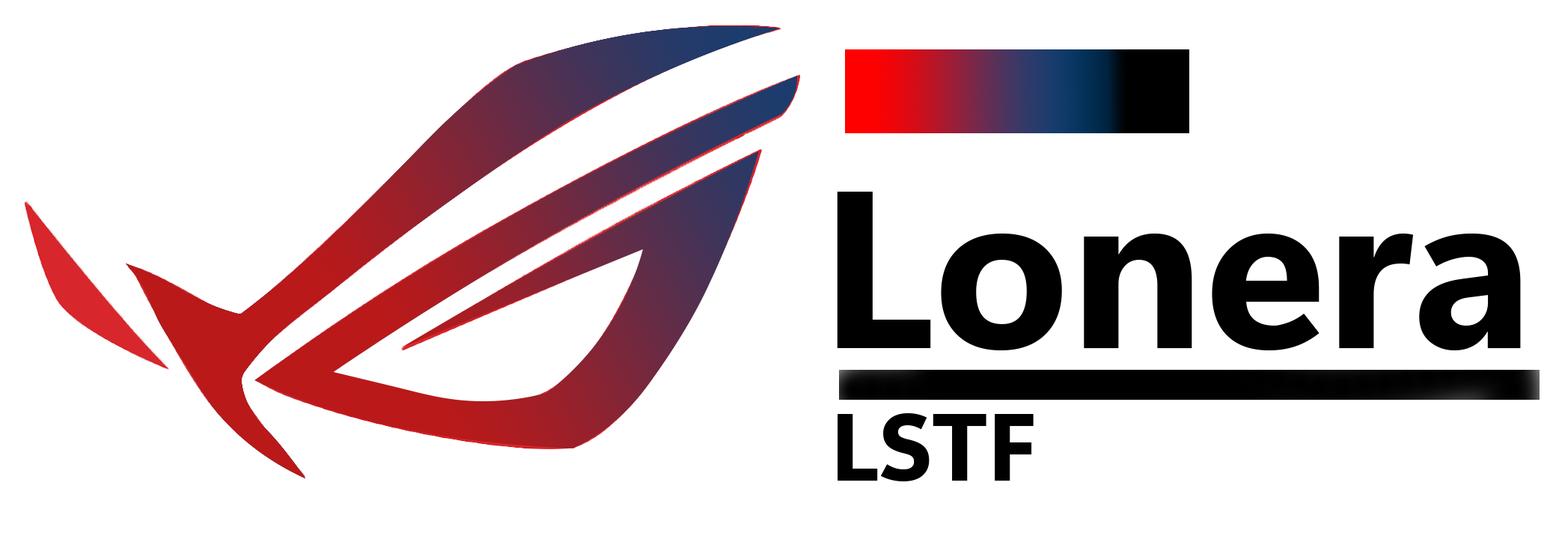
<style>
.page{position:relative;width:1568px;height:533px;background:#ffffff}
.page>*{position:absolute;margin:0}
.t1{font:222.7px "SegoeUIVariable-BoldText";color:#000000}
.t2{font:94.9px "SegoeUIVariable-BoldText";color:#000000}
</style>
<div class="page">
<p class="t1" style="left:837px;top:192px;width:684px;height:158px">Lonera</p>
<p class="t2" style="left:838px;top:413px;width:196px;height:68px">LSTF</p>
</div>
